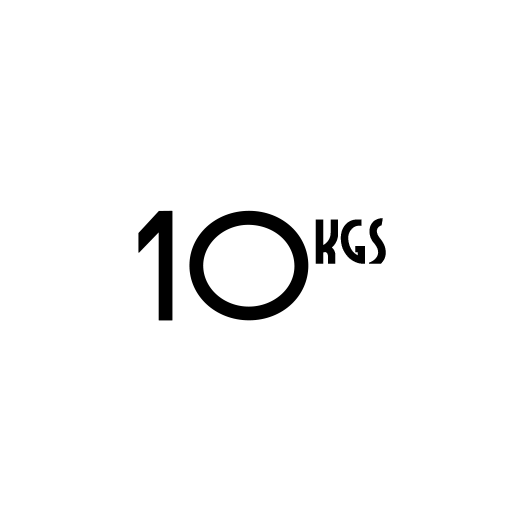
<style>
.page{position:relative;width:512px;height:512px;background:#ffffff}
.page>*{position:absolute;margin:0}
.t1{font:136.1px "DKOtago";color:#000000;font-weight:bold}
.t2{font:57.9px "DubbaDubbaNF";color:#000000;font-weight:bold}
</style>
<div class="page">
<p class="t1" style="left:138px;top:210px;width:171px;height:111px">10</p>
<p class="t2" style="left:315px;top:218px;width:71px;height:46px">KGS</p>
</div>
